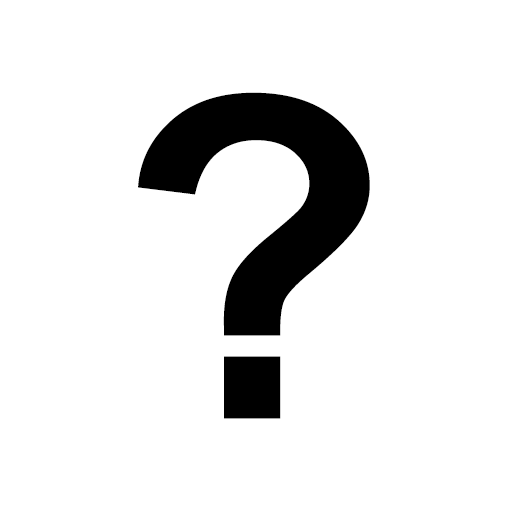
<style>
.page{position:relative;width:512px;height:512px;background:#ffffff}
.page>*{position:absolute;margin:0}
.t1{font:450.1px "Arial-BoldMT";letter-spacing:0.015em;color:#000000}
</style>
<div class="page">
<p class="t1" style="left:138px;top:92px;width:232px;height:327px">?</p>
</div>
